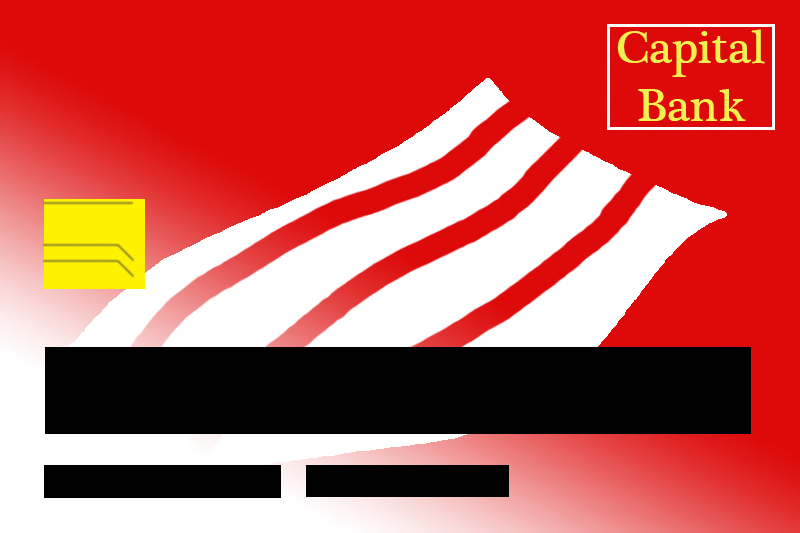
<style>
.page{position:relative;width:800px;height:533px;background:#ffffff}
.page>*{position:absolute;margin:0}
.t1{font:48px "PlantagenetCherokee";color:#f2f04e}
</style>
<div class="page">
<p class="t1" style="left:617px;top:29px;width:148px;height:92px;text-align:center">Capital<br>Bank</p>
</div>
